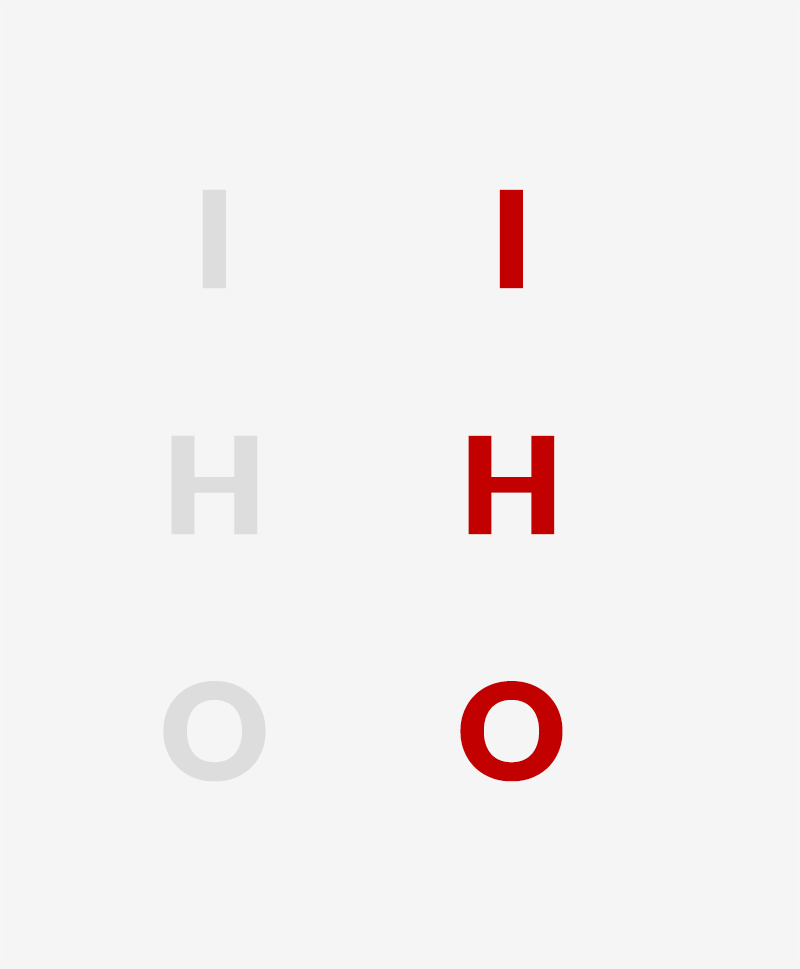
<style>
.page{position:relative;width:800px;height:969px;background:#f5f5f5}
.page>*{position:absolute;margin:0}
.t1{font:134.7px/246.1px "Lato-Black";color:#dddddd;text-transform:uppercase}
.t2{font:134.7px/246.1px "Lato-Black";color:#c30000;text-transform:uppercase}
</style>
<div class="page">
<p class="t1" style="left:163px;top:189px;width:103px;height:593px;text-align:center">I<br>H<br>O</p>
<p class="t2" style="left:460px;top:189px;width:103px;height:593px;text-align:center">I<br>H<br>O</p>
</div>
